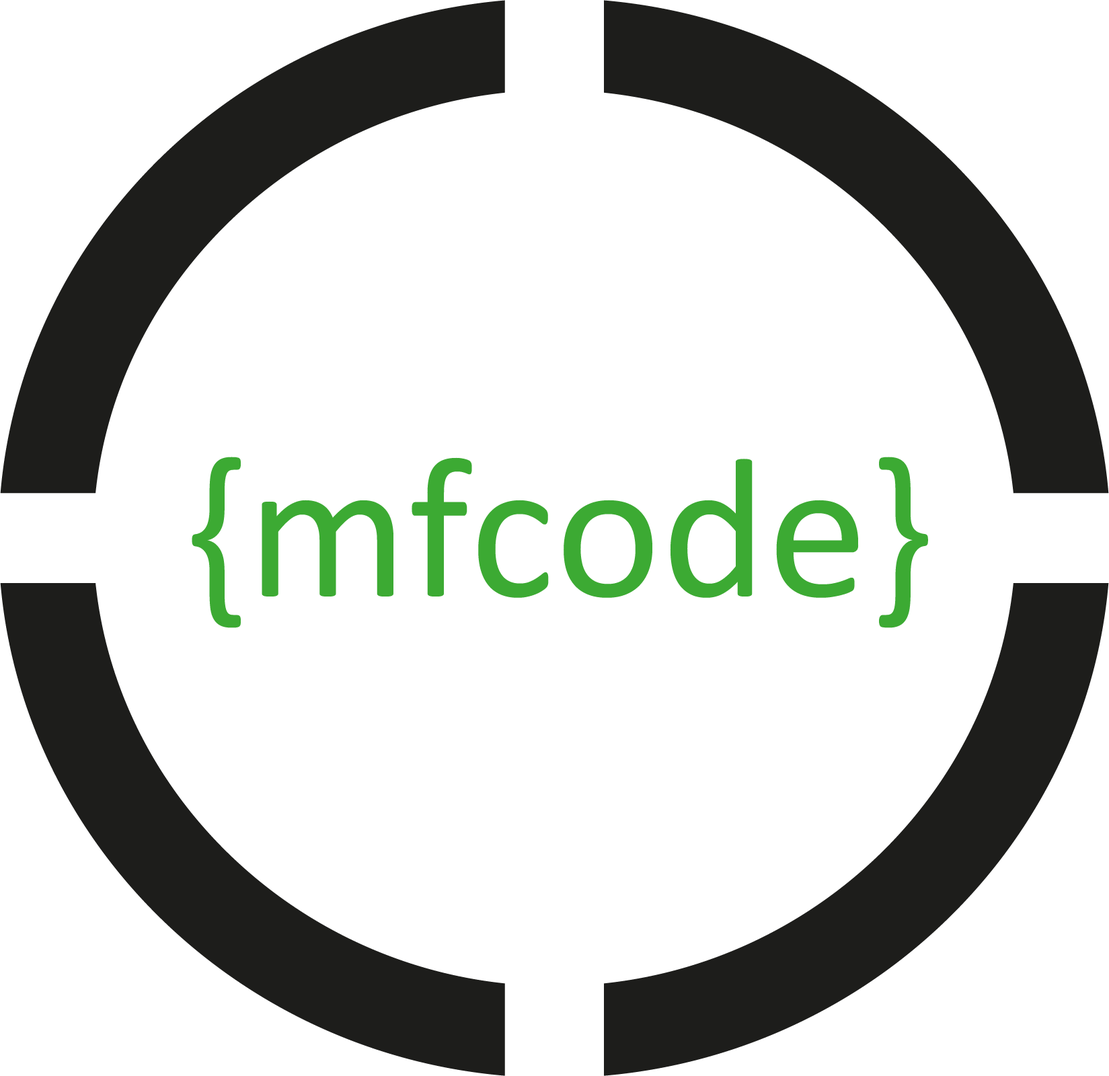
<style>
.page{position:relative;width:1109px;height:1076px;background:#ffffff}
.page>*{position:absolute;margin:0}
.t1{font:201.7px "Calibri";color:#3caa33}
</style>
<div class="page">
<p class="t1" style="left:192px;top:456px;width:736px;height:172px">{mfcode}</p>
</div>
